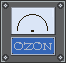
<style>
.page{position:relative;width:66px;height:63px;background:#5d5e5f}
.page>*{position:absolute;margin:0}
.t1{font:11.1px "Immortal";color:#acb7c9}
</style>
<div class="page">
<p class="t1" style="left:14px;top:42px;width:38px;height:8px">OZON</p>
</div>
